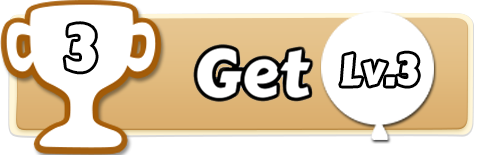
<style>
.page{position:relative;width:477px;height:155px;background:#ffffff}
.page>*{position:absolute;margin:0}
.t1{font:62.2px "CarterOne";color:#ffffff}
.t2{font:42.3px "CarterOne";color:#ffffff}
</style>
<div class="page">
<p class="t1" style="left:65px;top:24px;width:31px;height:48px">3</p>
<p class="t2" style="left:341px;top:53px;width:77px;height:33px">Lv.3</p>
</div>
